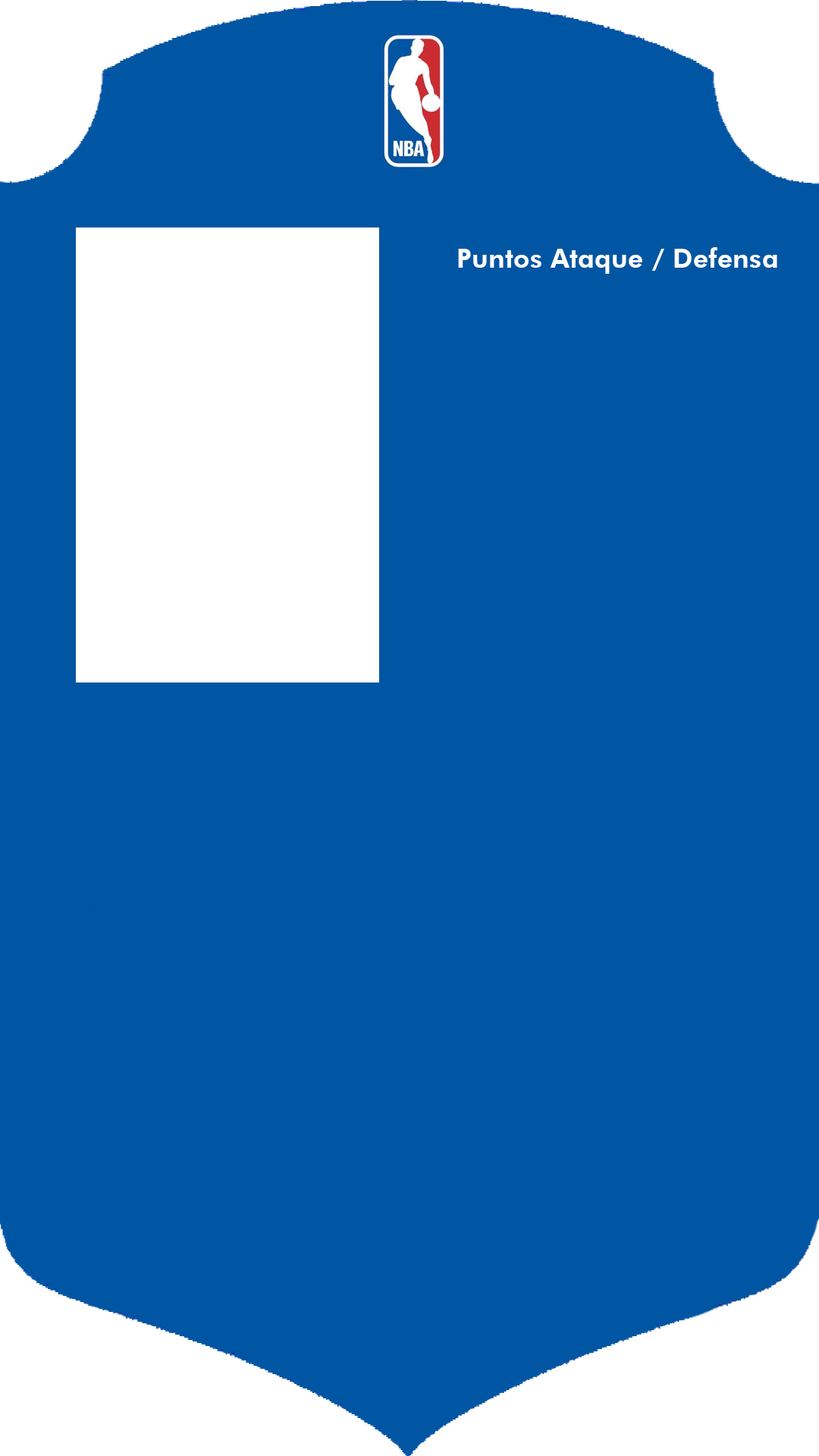
<style>
.page{position:relative;width:819px;height:1456px;background:#0056a3}
.page>*{position:absolute;margin:0}
.t1{font:26.5px "FuturaBT-Heavy";letter-spacing:0.01em;color:#ffffff}
</style>
<div class="page">
<p class="t1" style="left:458px;top:247px;width:319px;height:27px">Puntos Ataque / Defensa</p>
</div>
